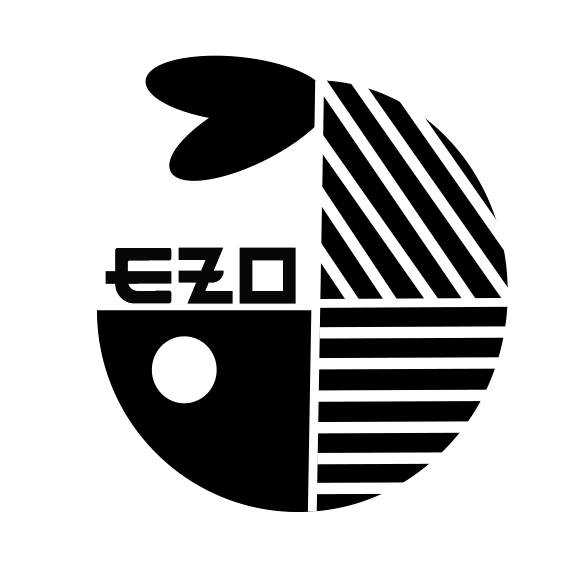
<style>
.page{position:relative;width:576px;height:576px;background:#ffffff}
.page>*{position:absolute;margin:0}
.t1{font:75.2px "FunnySamuraiDemoRegular";color:#060808;text-transform:uppercase}
</style>
<div class="page">
<p class="t1" style="left:105px;top:247px;width:191px;height:57px">Ezo</p>
</div>
